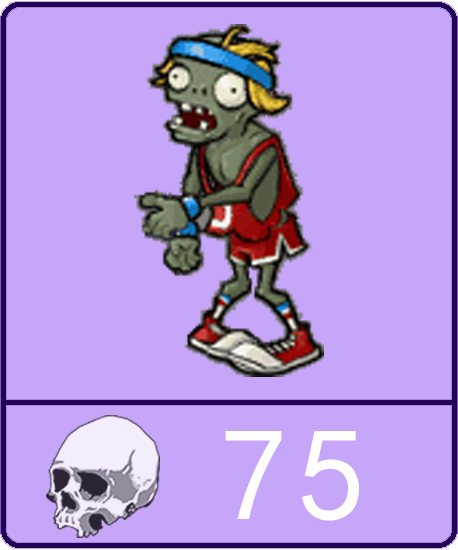
<style>
.page{position:relative;width:458px;height:550px;background:#c6a6f9}
.page>*{position:absolute;margin:0}
.t1{font:133.3px "SimHei";letter-spacing:0.1em;color:#fefefc}
</style>
<div class="page">
<p class="t1" style="left:225px;top:431px;width:135px;height:90px">75</p>
</div>
